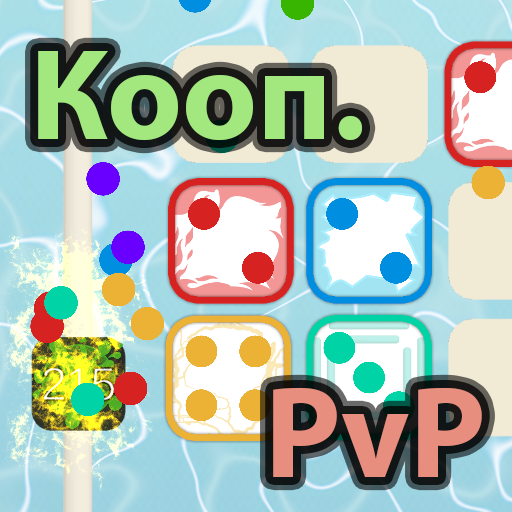
<style>
.page{position:relative;width:512px;height:512px}
.page>*{position:absolute;margin:0}
.t1{font:130px "MyriadPro-Bold";color:#a2e87f}
.t2{font:130px "MyriadPro-Bold";color:#e88e7f}
</style>
<div class="page">
<p class="t1" style="left:38px;top:51px;width:324px;height:90px;text-align:center">Кооп.<br>Кооп.</p>
<p class="t2" style="left:273px;top:387px;width:209px;height:90px;text-align:center">PvP<br>Кооп.</p>
</div>
